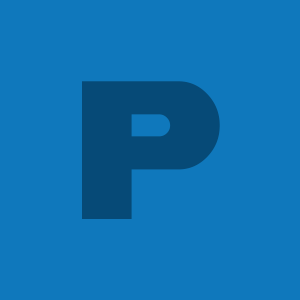
<style>
.page{position:relative;width:300px;height:300px;background:#0f78bc}
.page>*{position:absolute;margin:0}
.t1{font:176.3px "NiseSegaSonic";color:#064a77}
</style>
<div class="page">
<p class="t1" style="left:82px;top:81px;width:138px;height:138px">P</p>
</div>
